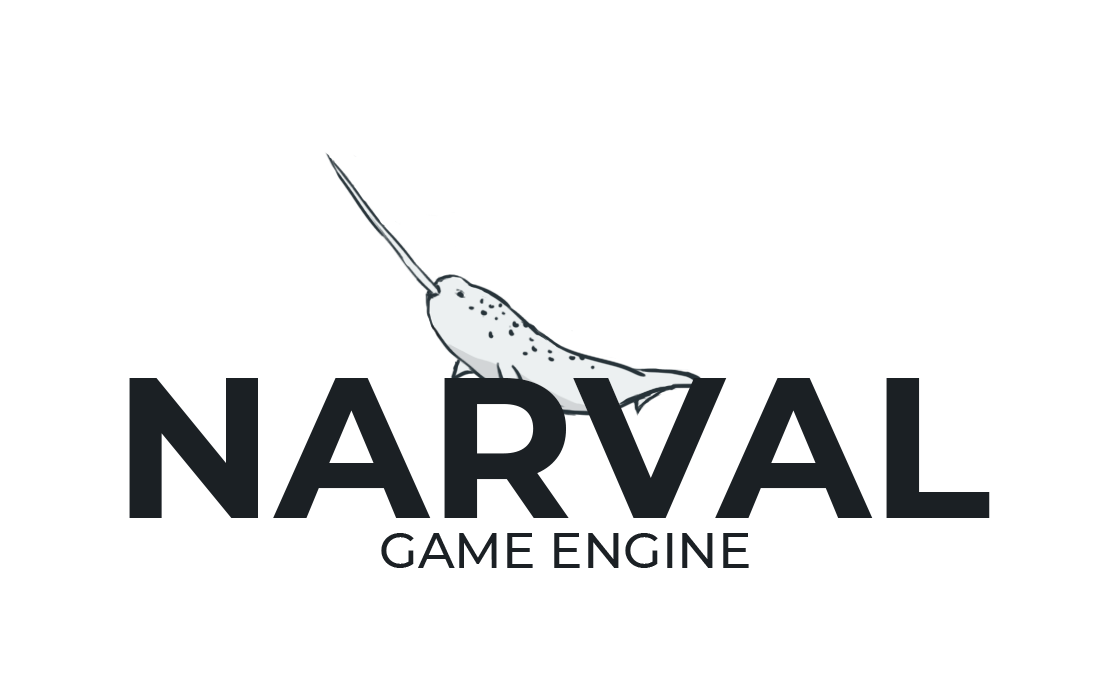
<style>
.page{position:relative;width:1102px;height:686px;background:#ffffff}
.page>*{position:absolute;margin:0}
.t1{font:200px "Montserrat-Bold";color:#1b2024}
.t2{font:50px "Montserrat-Medium";color:#1b2024}
</style>
<div class="page">
<p class="t1" style="left:129px;top:378px;width:861px;height:140px">NARVAL</p>
<p class="t2" style="left:381px;top:533px;width:368px;height:35px">GAME ENGINE</p>
</div>
